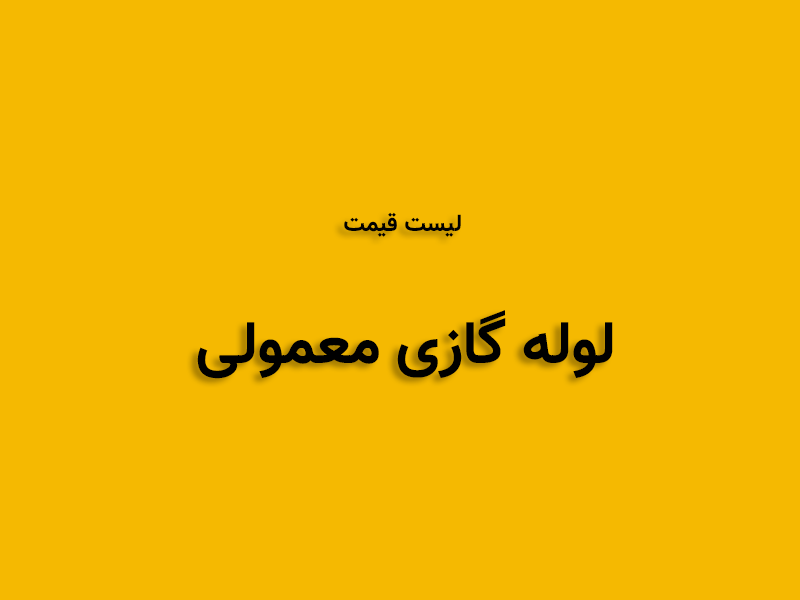
<style>
.page{position:relative;width:800px;height:600px;background:#f5b901}
.page>*{position:absolute;margin:0}
.t1{font:60px "Vazir-Bold";color:#000000}
.t2{font:24px "Vazir-Bold";color:#000000}
</style>
<div class="page">
<p class="t1" style="left:197px;top:212px;width:416px;height:167px;text-align:center"><span class="t2">لیست قیمت <br><br></span>لوله گازی معمولی</p>
</div>
